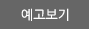
<style>
.page{position:relative;width:89px;height:29px;background:#666666}
.page>*{position:absolute;margin:0}
.t1{font:13px "NanumGothic";color:#ffffff}
</style>
<div class="page">
<p class="t1" style="left:21px;top:8px;width:48px;height:13px">예고보기</p>
</div>
